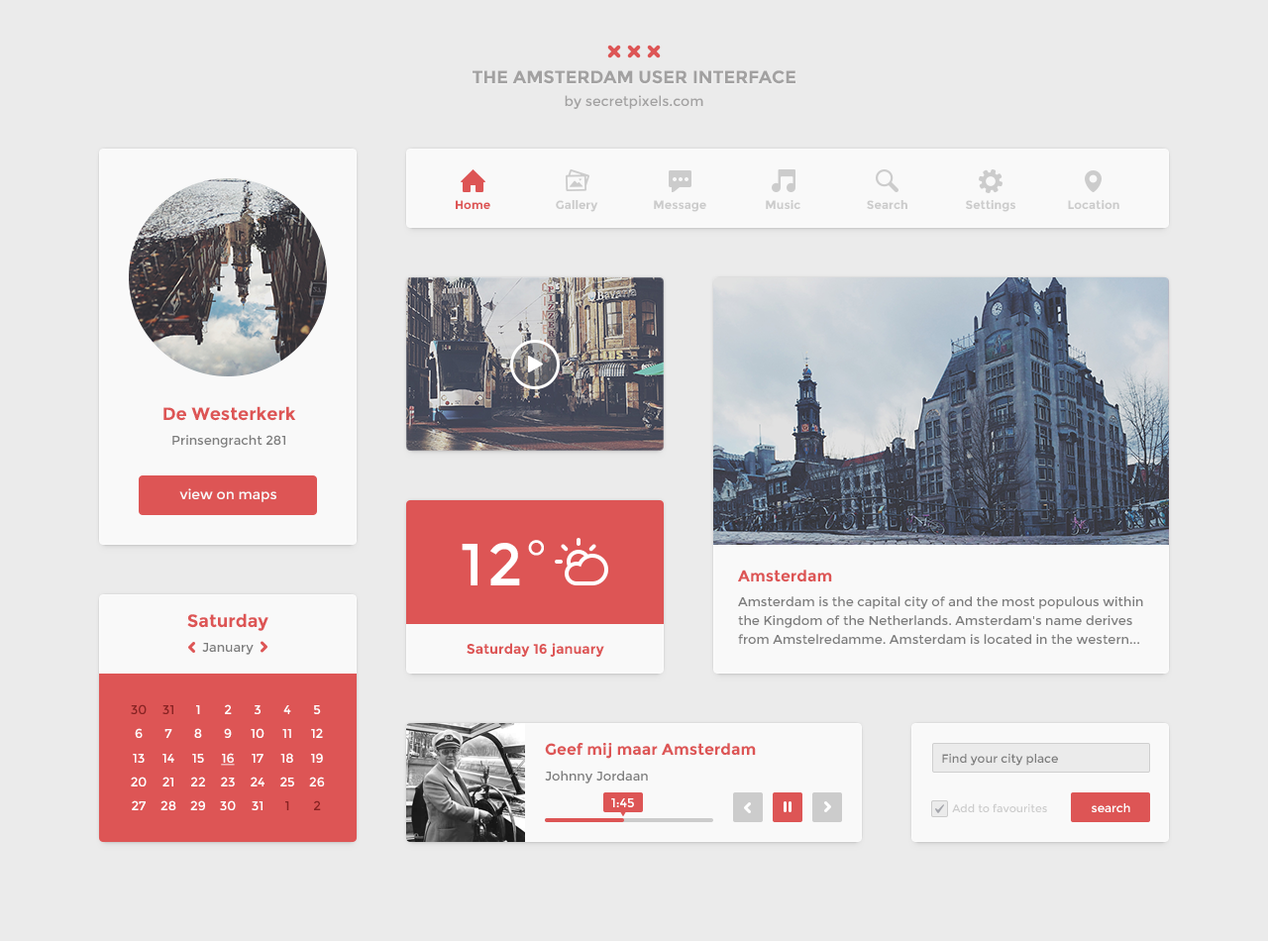
<style>
.page{position:relative;width:1268px;height:941px;background:#ebebeb}
.page>*{position:absolute;margin:0}
.t1{font:17.8px "Montserrat-Bold";color:#a2a1a1;text-transform:uppercase}
.t2{font:13.9px "Montserrat-Regular";color:#a2a1a1}
.t3{font:11.9px "Montserrat-Bold";color:#dd5555}
.t4{font:11.9px "Montserrat-Bold";color:#cccccc}
.t5{font:12.9px/17.8px "Montserrat-Regular";color:#7d7d7d}
.t6{font:17.8px/23.8px "Montserrat-Bold";color:#dd5555}
.t7{font:13.9px "Montserrat-Regular";color:#f9f9f9}
.t8{font:59.4px "Montserrat-Regular";letter-spacing:0.06em;color:#ffffff}
.t9{font:49.5px "Montserrat-Regular";letter-spacing:0.06em;color:#ffffff}
.t10{font:12.9px/18.8px "Montserrat-Regular";color:#7d7d7d}
.t11{font:15.8px/17.8px "Montserrat-Bold";color:#dd5555}
.t12{font:13.9px "Montserrat-Bold";color:#dd5555}
.t13{font:12.9px/17.8px "Montserrat-Regular";color:#ffffff}
.t14{font:12.9px/17.8px "Montserrat-Regular";color:#882323}
.t15{font:12.9px/17.8px "Montserrat-Regular";color:#882222}
.t16{font:12.9px/17.8px "Montserrat-Regular";color:#ffffff;text-decoration:underline}
.t17{font:11.9px "Montserrat-Regular";color:#7d7d7d}
.t18{font:12.9px "Montserrat-Regular";color:#ffffff}
.t19{font:10.9px "Montserrat-Regular";color:#cccccc}
.t20{font:11.9px "Montserrat-Regular";color:#ffffff}
</style>
<div class="page">
<p class="t1" style="left:472px;top:70px;width:323px;height:14px">The Amsterdam User Interface</p>
<p class="t2" style="left:564px;top:95px;width:139px;height:14px">by secretpixels.com</p>
<p class="t3" style="left:456px;top:200px;width:34px;height:9px">Home</p>
<p class="t4" style="left:556px;top:200px;width:42px;height:12px">Gallery</p>
<p class="t4" style="left:654px;top:200px;width:52px;height:12px">Message</p>
<p class="t4" style="left:765px;top:200px;width:35px;height:9px">Music</p>
<p class="t4" style="left:866px;top:200px;width:41px;height:9px">Search</p>
<p class="t4" style="left:966px;top:200px;width:49px;height:12px">Settings</p>
<p class="t4" style="left:1068px;top:200px;width:51px;height:9px">Location</p>
<p class="t5" style="left:163px;top:406px;width:133px;height:42px;text-align:center"><span class="t6">De Westerkerk<br></span>Prinsengracht 281</p>
<p class="t7" style="left:179px;top:488px;width:97px;height:14px">view on maps</p>
<p class="t8" style="left:461px;top:540px;width:83px;height:45px">12<span class="t9">°</span></p>
<p class="t10" style="left:738px;top:569px;width:405px;height:75px"><span class="t11">Amsterdam<br></span>Amsterdam is the capital city of and the most populous within the Kingdom of the Netherlands. Amsterdam's name derives from Amstelredamme. Amsterdam is located in the western... Netherlands</p>
<p class="t6" style="left:187px;top:613px;width:81px;height:42px;text-align:center">Saturday<br><span class="t5">January</span></p>
<p class="t12" style="left:466px;top:643px;width:138px;height:14px">Saturday 16 january</p>
<p class="t13" style="left:131px;top:704px;width:16px;height:106px;text-align:center"><span class="t14">30<br></span>6<br>13<br>20<br>27</p>
<p class="t13" style="left:160px;top:705px;width:16px;height:105px;text-align:center"><span class="t15">31<br></span>7<br>14<br>21<br>28</p>
<p class="t13" style="left:190px;top:705px;width:15px;height:105px;text-align:center">1<br>8<br>15<br>22<br>29</p>
<p class="t13" style="left:220px;top:704px;width:16px;height:106px;text-align:center">2<br>9<br><span class="t16">16<br></span>23<br>30</p>
<p class="t13" style="left:251px;top:705px;width:13px;height:105px;text-align:center">3<br>10<br>17<br>24<br>31</p>
<p class="t13" style="left:280px;top:705px;width:14px;height:105px;text-align:center">4<br>11<br>18<br>25<br><span class="t15">1</span></p>
<p class="t13" style="left:309px;top:705px;width:16px;height:105px;text-align:center">5<br>12<br>19<br>26<br><span class="t15">2</span></p>
<p class="t11" style="left:545px;top:743px;width:211px;height:40px">Geef mij maar Amsterdam<br><span class="t10">Johnny Jordaan</span></p>
<p class="t17" style="left:942px;top:754px;width:116px;height:11px">Find your city place</p>
<p class="t18" style="left:611px;top:798px;width:23px;height:9px">1:45</p>
<p class="t19" style="left:952px;top:803px;width:95px;height:9px">Add to favourites</p>
<p class="t20" style="left:1091px;top:803px;width:39px;height:9px">search</p>
</div>
